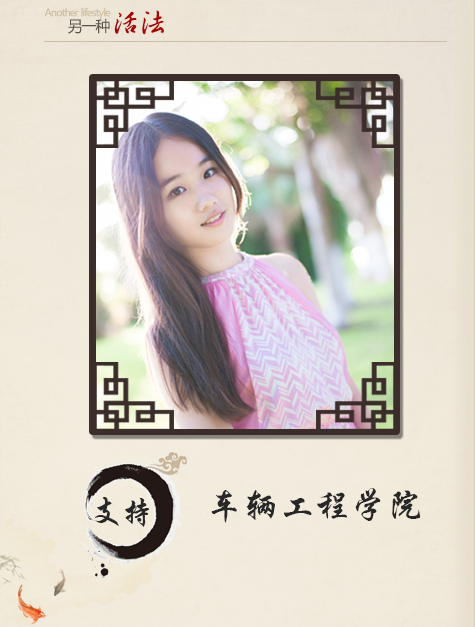
<style>
.page{position:relative;width:475px;height:627px}
.page>*{position:absolute;margin:0}
.t1{font:31.9px "STXingkai-SC-Bold";color:#272727}
.t2{font:36px "STXingkai-SC-Bold";color:#272727}
</style>
<div class="page">
<p class="t1" style="left:94px;top:497px;width:56px;height:30px">支持</p>
<p class="t2" style="left:211px;top:488px;width:210px;height:35px">车辆工程学院</p>
</div>
